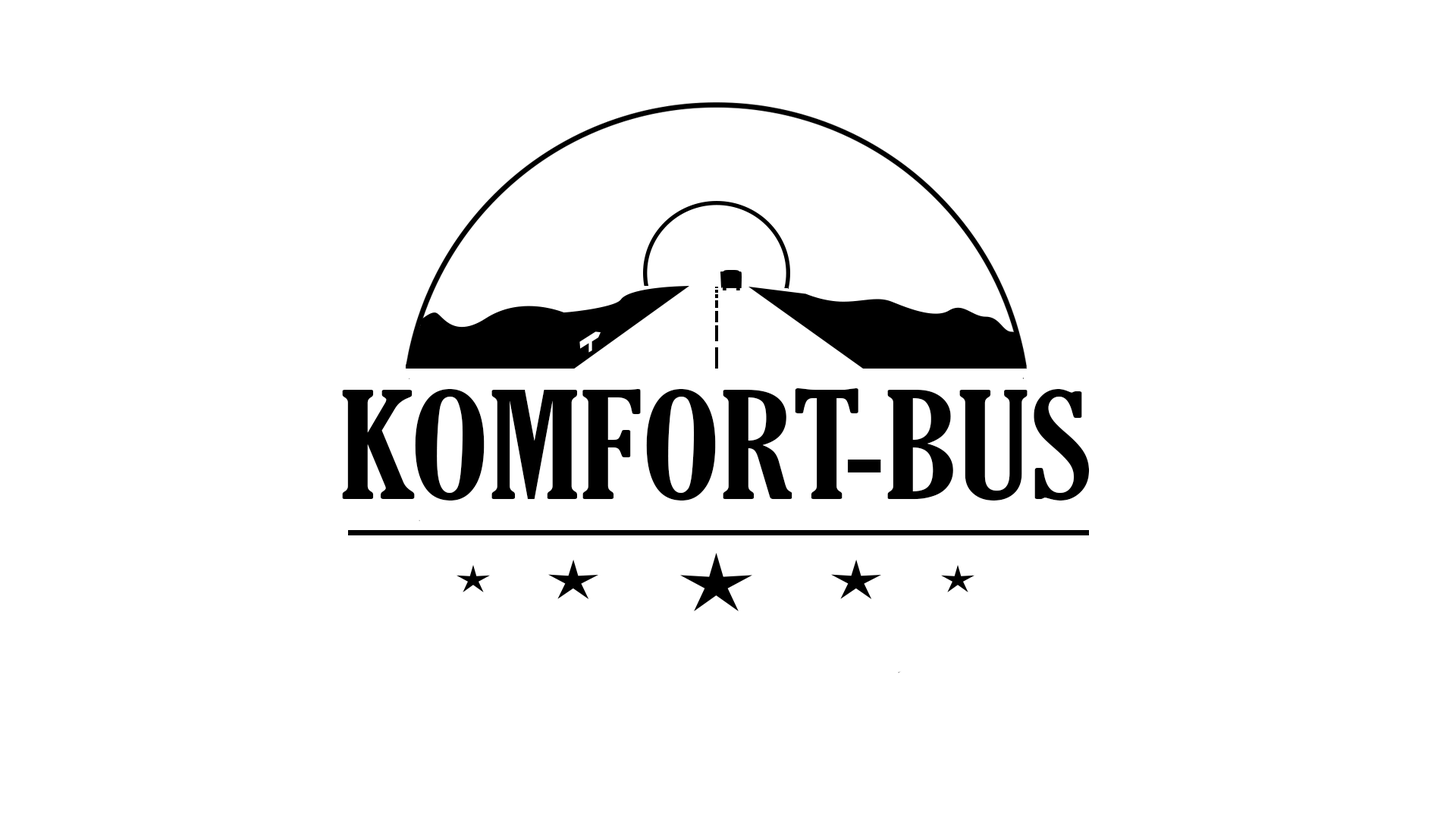
<style>
.page{position:relative;width:1456px;height:819px;background:#ffffff}
.page>*{position:absolute;margin:0}
.t1{font:144.1px "GloucesterMT-ExtraCondensed";color:#000000;scale:1.21 1}
</style>
<div class="page">
<p class="t1" style="left:342px;top:388px;width:748px;height:112px">KOMFORT-BUS</p>
</div>
